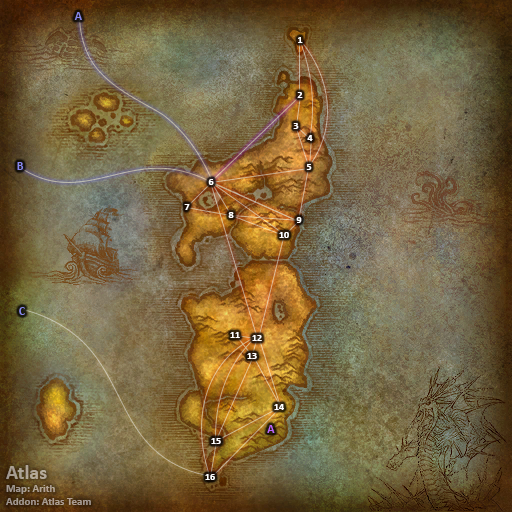
<style>
.page{position:relative;width:512px;height:512px}
.page>*{position:absolute;margin:0}
.t1{font:12px "Calibri-Bold";color:#8788ee}
.t2{font:10px "Calibri-Bold";color:#ffffff}
.t3{font:12px "Calibri-Bold";color:#bb66ff}
.t4{font:11px "Calibri-Bold";color:#aca092}
.t5{font:20px "Calibri-Bold";color:#aca092}
</style>
<div class="page">
<p class="t1" style="left:74px;top:12px;width:8px;height:8px">A</p>
<p class="t2" style="left:298px;top:37px;width:5px;height:6px">1</p>
<p class="t2" style="left:297px;top:92px;width:6px;height:6px">2</p>
<p class="t2" style="left:293px;top:123px;width:6px;height:6px">3</p>
<p class="t2" style="left:307px;top:135px;width:6px;height:6px">4</p>
<p class="t1" style="left:17px;top:162px;width:7px;height:8px">B</p>
<p class="t2" style="left:306px;top:164px;width:6px;height:6px">5</p>
<p class="t2" style="left:208px;top:179px;width:6px;height:6px">6</p>
<p class="t2" style="left:184px;top:204px;width:6px;height:6px">7</p>
<p class="t2" style="left:228px;top:212px;width:6px;height:6px">8</p>
<p class="t2" style="left:296px;top:217px;width:6px;height:6px">9</p>
<p class="t2" style="left:279px;top:232px;width:10px;height:6px">10</p>
<p class="t1" style="left:19px;top:307px;width:6px;height:8px">C</p>
<p class="t2" style="left:230px;top:332px;width:10px;height:6px">11</p>
<p class="t2" style="left:252px;top:335px;width:10px;height:6px">12</p>
<p class="t2" style="left:247px;top:353px;width:10px;height:6px">13</p>
<p class="t2" style="left:274px;top:404px;width:10px;height:6px">14</p>
<p class="t3" style="left:267px;top:425px;width:8px;height:8px">A</p>
<p class="t2" style="left:211px;top:438px;width:10px;height:6px">15</p>
<p class="t4" style="left:6px;top:465px;width:85px;height:40px"><span class="t5">Atlas<br></span>Map: Arith<br>Addon: Atlas Team</p>
<p class="t2" style="left:205px;top:474px;width:10px;height:6px">16</p>
</div>
